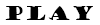
<style>
.page{position:relative;width:100px;height:25px;background:#ffffff}
.page>*{position:absolute;margin:0}
.t1{font:18.7px "GoudyStout";color:#000000}
</style>
<div class="page">
<p class="t1" style="left:5px;top:6px;width:88px;height:14px">PLAY</p>
</div>
